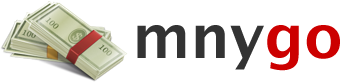
<style>
.page{position:relative;width:343px;height:84px;background:#ffffff}
.page>*{position:absolute;margin:0}
.t1{font:60px "LucidaGrande-Bold";color:#333333}
.t2{font:60px "LucidaGrande-Bold";color:#cc0000}
</style>
<div class="page">
<p class="t1" style="left:137px;top:25px;width:203px;height:46px">mny<span class="t2">go</span></p>
</div>
